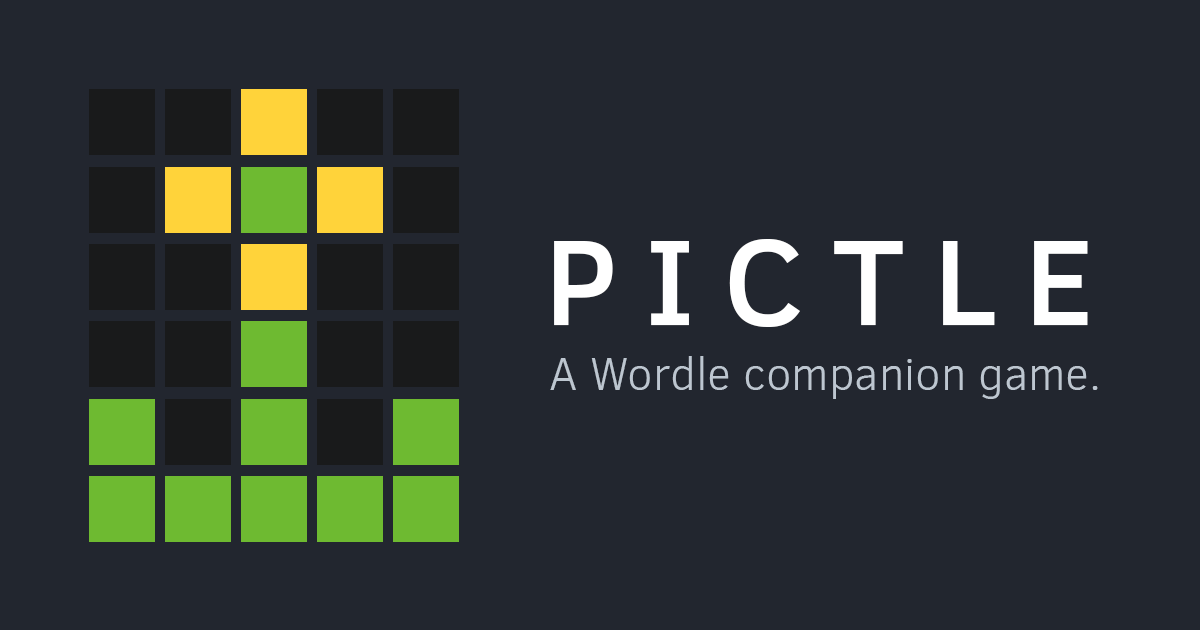
<style>
.page{position:relative;width:1200px;height:630px;background:#22262f}
.page>*{position:absolute;margin:0}
.t1{font:125px "ClearSans-Medium";letter-spacing:0.225em;color:#ffffff}
.t2{font:45.8px "ClearSans-Light";color:#bdc6d0}
</style>
<div class="page">
<p class="t1" style="left:554px;top:239px;width:534px;height:88px">PICTLE</p>
<p class="t2" style="left:550px;top:356px;width:548px;height:43px">A Wordle companion game.</p>
</div>
